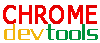
<style>
.page{position:relative;width:100px;height:43px;background:#ffffff}
.page>*{position:absolute;margin:0}
.t1{font:24.1px "Tahoma";color:#f90101;font-weight:bold}
.t2{font:18.9px "RepublikaIVCnd";color:#f2b50f;scale:1.41 1}
.t3{font:18.9px "RepublikaIVCnd";color:#00933b;scale:1.41 1}
</style>
<div class="page">
<p class="t1" style="left:3px;top:5px;width:94px;height:19px">CHROME</p>
<p class="t2" style="left:4px;top:24px;width:40px;height:16px">DEV</p>
<p class="t3" style="left:46px;top:24px;width:52px;height:16px">TOOLS</p>
</div>
